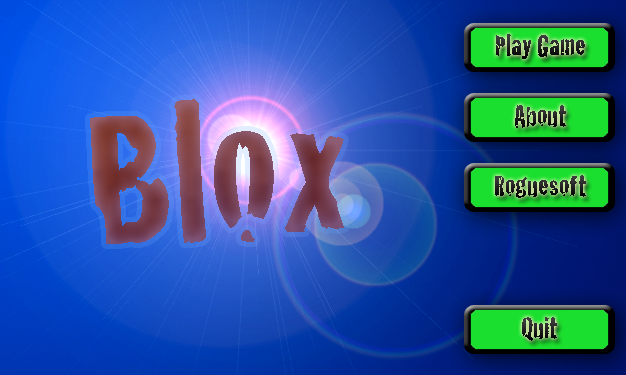
<style>
.page{position:relative;width:626px;height:375px}
.page>*{position:absolute;margin:0}
.t1{font:30px "Cracked";color:#1e1e1e}
.t2{font:200px "Cracked"}
.t3{font:30px "Cracked";color:#222222}
.t4{font:30px "Cracked"}
</style>
<div class="page">
<p class="t1" style="left:496px;top:34px;width:89px;height:25px">Play Game</p>
<p class="t2" style="left:90px;top:99px;width:254px;height:145px;rotate:-3deg">Blox</p>
<p class="t3" style="left:515px;top:105px;width:51px;height:23px">About</p>
<p class="t3" style="left:495px;top:175px;width:91px;height:23px">Roguesoft</p>
<p class="t4" style="left:522px;top:317px;width:35px;height:24px">Quit</p>
</div>
